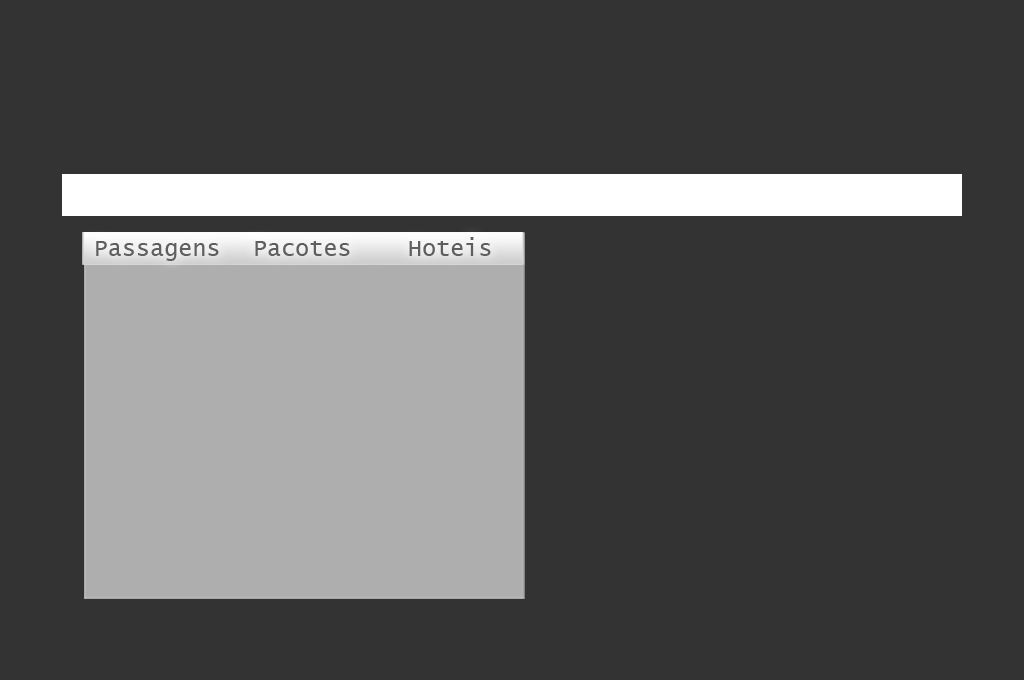
<style>
.page{position:relative;width:1024px;height:680px;background:#333333}
.page>*{position:absolute;margin:0}
.t1{font:23.9px "LucidaConsole";color:#5f5f5f}
</style>
<div class="page">
<p class="t1" style="left:96px;top:241px;width:123px;height:20px">Passagens</p>
<p class="t1" style="left:255px;top:241px;width:95px;height:15px">Pacotes</p>
<p class="t1" style="left:409px;top:237px;width:82px;height:19px">Hoteis</p>
</div>
